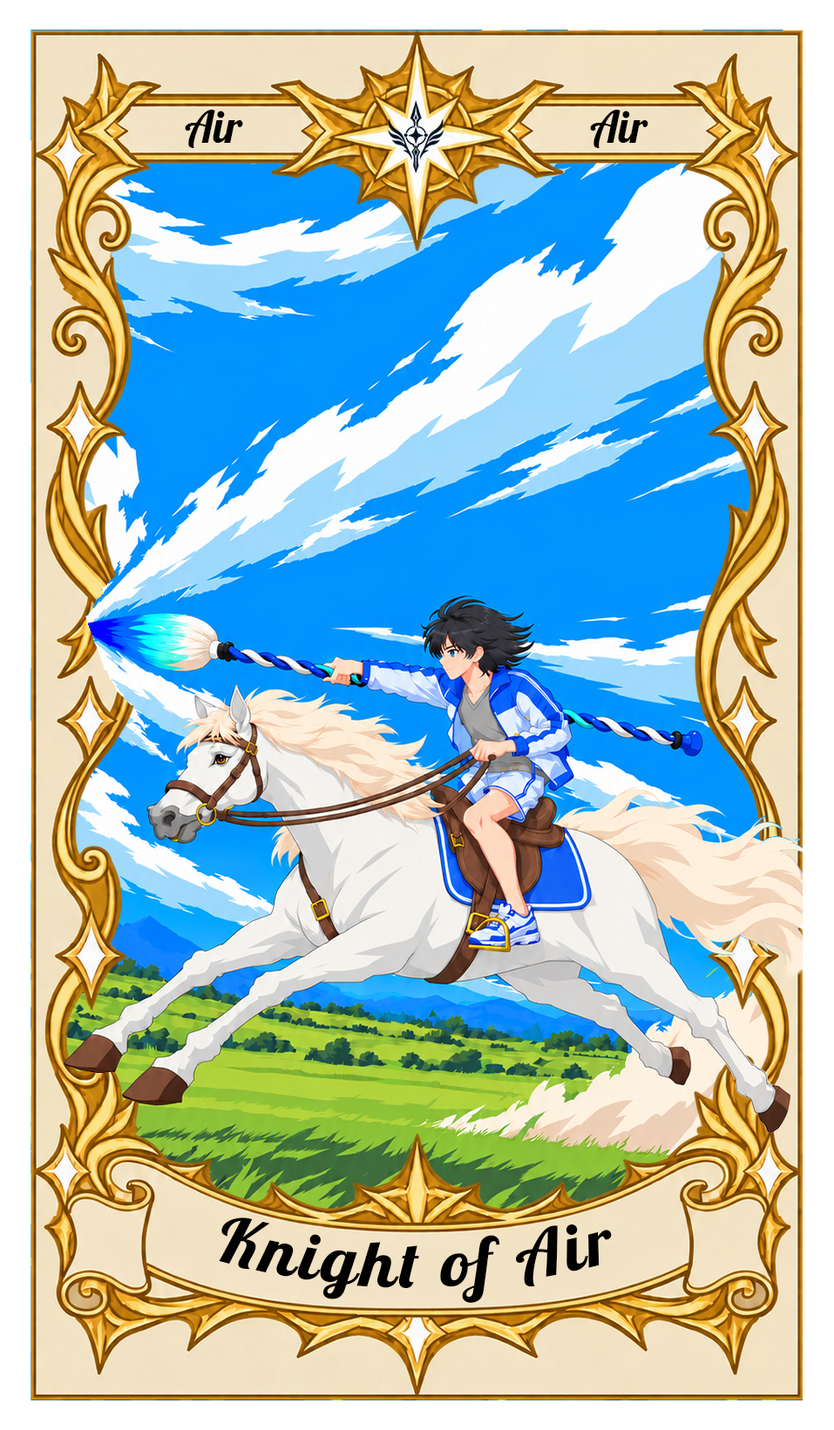
<style>
.page{position:relative;width:834px;height:1430px}
.page>*{position:absolute;margin:0}
.t1{font:43.6px "Lobster-Regular";color:#000000}
.t2{font:65.3px "Lobster-Regular";letter-spacing:0.05em;color:#000000}
</style>
<div class="page">
<p class="t1" style="left:185px;top:110px;width:58px;height:38px">Air</p>
<p class="t1" style="left:590px;top:110px;width:58px;height:38px">Air</p>
<p class="t2" style="left:219px;top:1218px;width:393px;height:85px">Knight of Air</p>
</div>
